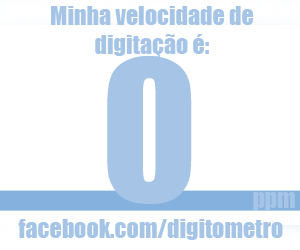
<style>
.page{position:relative;width:300px;height:250px;background:#ffffff}
.page>*{position:absolute;margin:0}
.t1{font:24px "Impact";color:#a6c5e6}
.t2{font:180px "Impact";color:#a6c5e6}
</style>
<div class="page">
<p class="t1" style="left:51px;top:6px;width:203px;height:52px;text-align:center">Minha velocidade de<br>digitação é:</p>
<p class="t2" style="left:107px;top:56px;width:85px;height:148px">0</p>
<p class="t1" style="left:253px;top:192px;width:42px;height:18px">ppm</p>
<p class="t1" style="left:18px;top:219px;width:265px;height:21px">facebook.com/digitometro</p>
</div>
